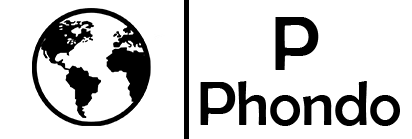
<style>
.page{position:relative;width:412px;height:139px;background:#ffffff}
.page>*{position:absolute;margin:0}
.t1{font:78.3px "BerlinSansFB-Reg";color:#000000}
.t2{font:62.7px "BerlinSansFB-Reg";color:#000000}
</style>
<div class="page">
<p class="t1" style="left:275px;top:17px;width:44px;height:53px">P</p>
<p class="t2" style="left:200px;top:81px;width:200px;height:45px">Phondo</p>
</div>
